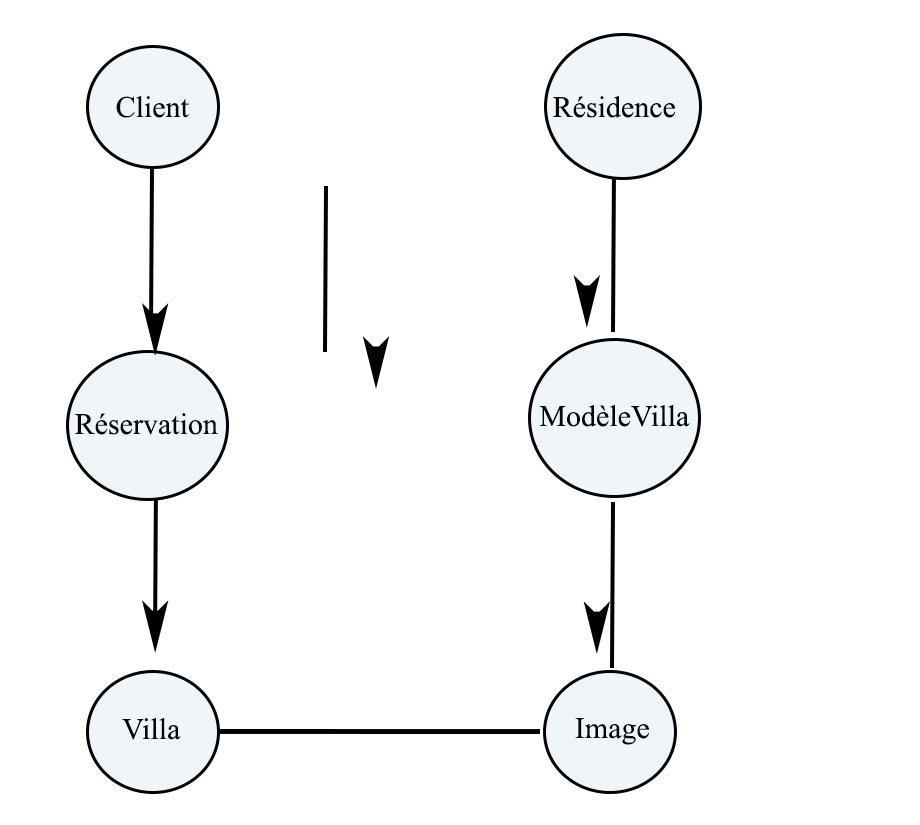
<style>
.page{position:relative;width:920px;height:825px;background:#ffffff}
.page>*{position:absolute;margin:0}
.t1{font:30px "TimesNewRomanPSMT";color:#060606}
</style>
<div class="page">
<p class="t1" style="left:116px;top:96px;width:73px;height:22px">Client</p>
<p class="t1" style="left:553px;top:96px;width:123px;height:22px">Résidence</p>
<p class="t1" style="left:75px;top:413px;width:143px;height:22px">Réservation</p>
<p class="t1" style="left:539px;top:405px;width:151px;height:22px">ModèleVilla</p>
<p class="t1" style="left:122px;top:718px;width:59px;height:22px">Villa</p>
<p class="t1" style="left:575px;top:718px;width:74px;height:27px">Image</p>
</div>
